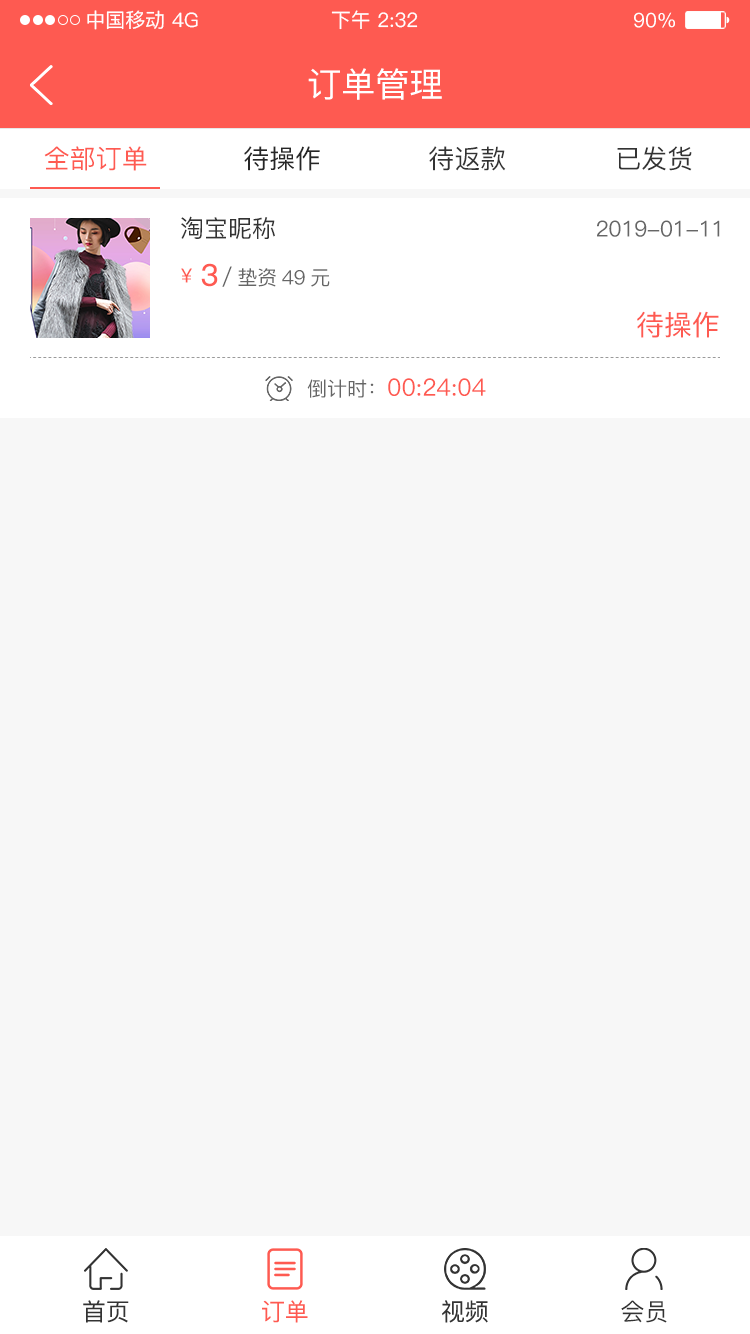
<style>
.page{position:relative;width:750px;height:1334px;background:#f7f7f7}
.page>*{position:absolute;margin:0}
.t1{font:20px "PingFang-SC-Medium";color:#ffffff}
.t2{font:34px "PingFang-SC-Medium";color:#ffffff}
.t3{font:26px "PingFang-SC-Medium";color:#fe5a51}
.t4{font:26px "PingFang-SC-Medium";color:#262626}
.t5{font:26px "PingFang-SC-Medium";color:#333333}
.t6{font:24px "PingFang-SC-Medium";color:#333333}
.t7{font:22px "PingFang-SC-Medium";letter-spacing:-0.025em;color:#666666}
.t8{font:19.8px "PingFang-SC-Medium";color:#fe5a51}
.t9{font:29.6px "PingFang-SC-Medium";color:#fe5a51;font-weight:bold}
.t10{font:20px "PingFang-SC-Medium";letter-spacing:-0.025em;color:#666666}
.t11{font:28px "PingFang-SC-Medium";color:#fe5a51}
.t12{font:24px "PingFang-SC-Medium";color:#fe5a51}
.t13{font:20px "PingFang-SC-Medium";color:#666666}
</style>
<div class="page">
<p class="t1" style="left:87px;top:10px;width:77px;height:20px">中国移动</p>
<p class="t1" style="left:172px;top:12px;width:26px;height:16px">4G</p>
<p class="t1" style="left:331px;top:10px;width:87px;height:20px">下午 2:32</p>
<p class="t1" style="left:634px;top:12px;width:41px;height:16px">90%</p>
<p class="t2" style="left:308px;top:68px;width:134px;height:32px">订单管理</p>
<p class="t3" style="left:44px;top:146px;width:103px;height:25px">全部订单</p>
<p class="t4" style="left:244px;top:146px;width:76px;height:25px">待操作</p>
<p class="t5" style="left:429px;top:146px;width:77px;height:25px">待返款</p>
<p class="t5" style="left:617px;top:146px;width:75px;height:25px">已发货</p>
<p class="t6" style="left:181px;top:216px;width:94px;height:24px">淘宝昵称</p>
<p class="t7" style="left:597px;top:220px;width:123px;height:17px">2019-01-11</p>
<p class="t8" style="left:181px;top:268px;width:11px;height:15px">￥</p>
<p class="t9" style="left:201px;top:263px;width:17px;height:24px">3</p>
<p class="t10" style="left:222px;top:266px;width:108px;height:21px"><span class="t7">/</span>垫资49元</p>
<p class="t11" style="left:637px;top:311px;width:82px;height:27px">待操作</p>
<p class="t12" style="left:307px;top:378px;width:179px;height:20px"><span class="t13">倒计时：</span>00:24:04</p>
<p class="t6" style="left:83px;top:1300px;width:46px;height:23px">首页</p>
<p class="t12" style="left:262px;top:1300px;width:46px;height:23px">订单</p>
<p class="t6" style="left:442px;top:1300px;width:46px;height:23px">视频</p>
<p class="t6" style="left:621px;top:1300px;width:46px;height:23px">会员</p>
</div>
